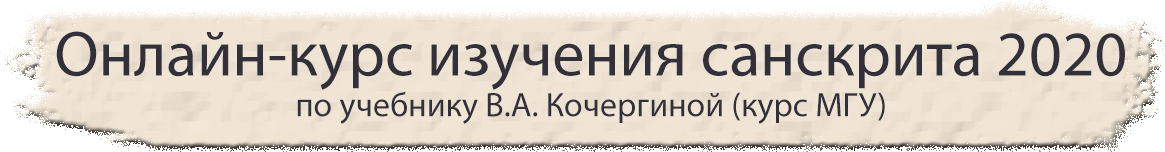
<style>
.page{position:relative;width:1165px;height:152px}
.page>*{position:absolute;margin:0}
.t1{font:34px "MyriadPro-Regular";color:#32303b}
.t2{font:64px "MyriadPro-Regular";color:#32303b}
</style>
<div class="page">
<p class="t1" style="left:56px;top:31px;width:1069px;height:93px;text-align:center"><span class="t2">Онлайн-курс изучения санскрита 2020<br></span>по учебнику В.А. Кочергиной (курс МГУ)</p>
</div>
